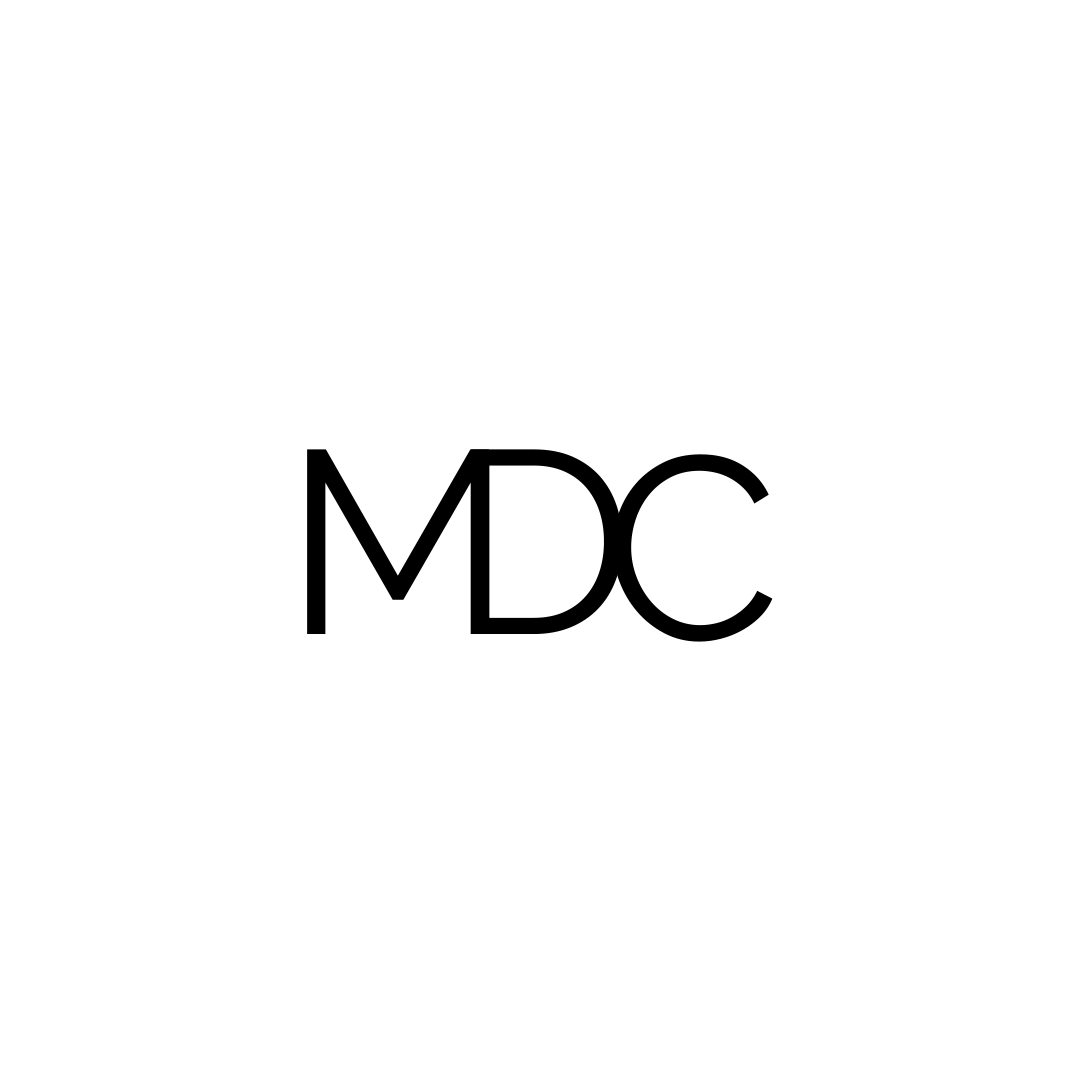
<style>
.page{position:relative;width:1080px;height:1080px;background:#ffffff}
.page>*{position:absolute;margin:0}
.t1{font:260.1px "Raleway-Regular";color:#000000}
</style>
<div class="page">
<p class="t1" style="left:307px;top:449px;width:182px;height:185px">M</p>
<p class="t1" style="left:471px;top:449px;width:152px;height:185px">D</p>
<p class="t1" style="left:612px;top:454px;width:161px;height:188px">C</p>
</div>
